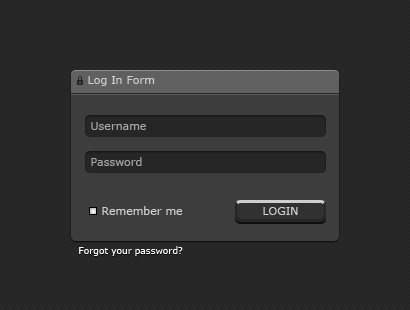
<style>
.page{position:relative;width:410px;height:310px;background:#252525}
.page>*{position:absolute;margin:0}
.t1{font:11px "Verdana";color:#cecece}
.t2{font:11px "Verdana";color:#a6a6a6}
.t3{font:9px "Verdana";color:#ffffff}
</style>
<div class="page">
<p class="t1" style="left:88px;top:76px;width:67px;height:10px">Log In Form</p>
<p class="t2" style="left:91px;top:122px;width:55px;height:8px">Username</p>
<p class="t2" style="left:91px;top:157px;width:51px;height:9px">Password</p>
<p class="t1" style="left:102px;top:206px;width:81px;height:9px">Remember me</p>
<p class="t1" style="left:263px;top:207px;width:35px;height:8px">LOGIN</p>
<p class="t3" style="left:79px;top:246px;width:104px;height:10px">Forgot your password?</p>
</div>
